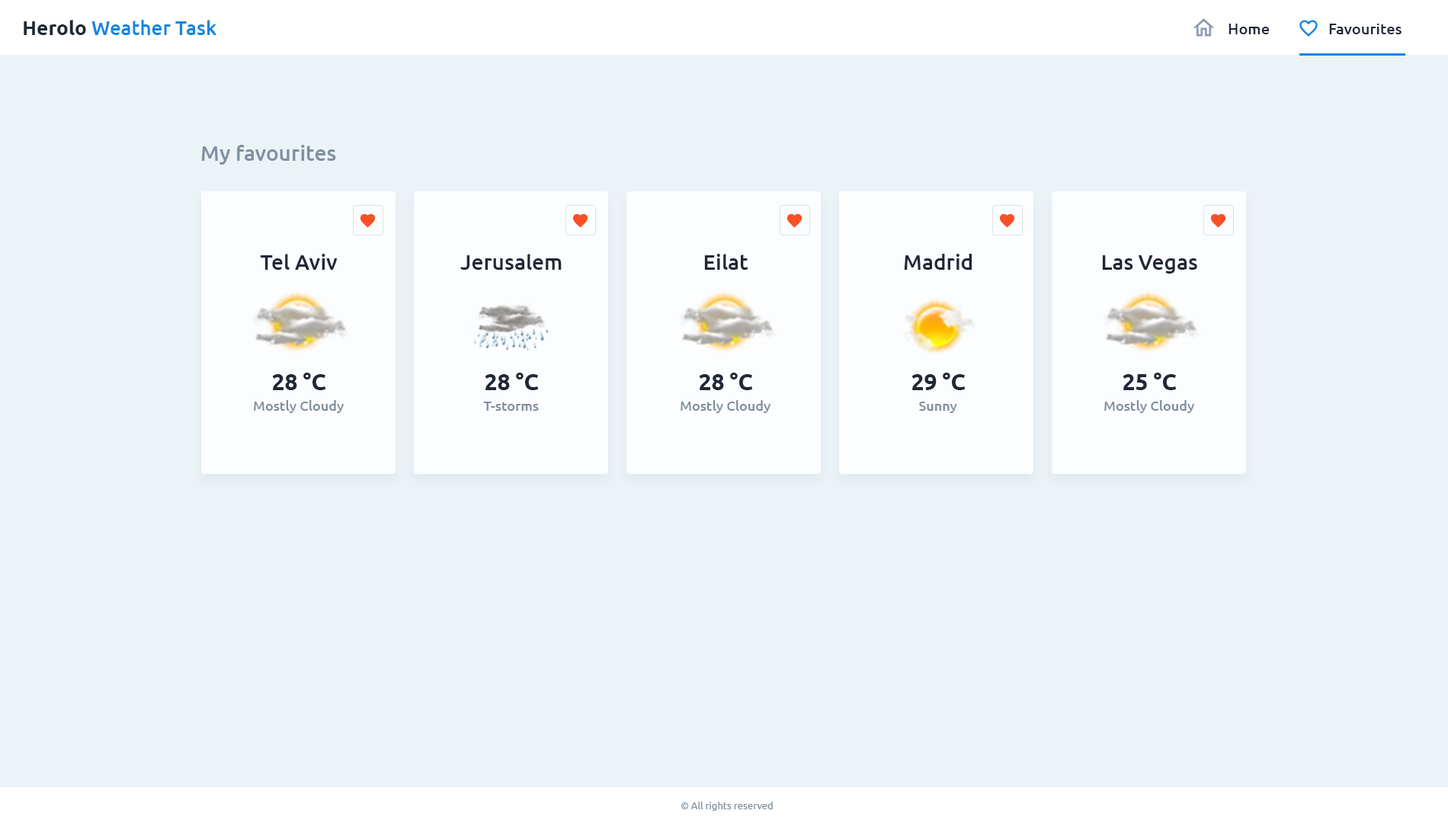
<style>
.page{position:relative;width:1448px;height:823px;background:#ecf3f7}
.page>*{position:absolute;margin:0}
.t1{font:19.8px "Ubuntu-Medium";color:#1685df}
.t2{font:19.8px "Ubuntu-Bold";color:#202837}
.t3{font:15.2px "Ubuntu-Medium";color:#202837}
.t4{font:21.3px "Ubuntu-Medium";color:#808fa1}
.t5{font:21.3px "Ubuntu-Medium";color:#202837}
.t6{font:22.9px "Ubuntu-Bold";color:#202837}
.t7{font:13.7px "Ubuntu-Medium";color:#808fa1}
.t8{font:9.9px "Ubuntu";color:#808fa1}
</style>
<div class="page">
<p class="t1" style="left:24px;top:20px;width:192px;height:15px"><span class="t2">Herolo </span>Weather Task</p>
<p class="t3" style="left:1229px;top:24px;width:41px;height:10px">Home</p>
<p class="t3" style="left:1329px;top:24px;width:73px;height:10px">Favourites</p>
<p class="t4" style="left:201px;top:145px;width:135px;height:20px">My favourites</p>
<p class="t5" style="left:260px;top:254px;width:78px;height:16px">Tel Aviv</p>
<p class="t5" style="left:460px;top:254px;width:102px;height:16px">Jerusalem</p>
<p class="t5" style="left:704px;top:254px;width:45px;height:16px">Eilat</p>
<p class="t5" style="left:904px;top:254px;width:68px;height:16px">Madrid</p>
<p class="t5" style="left:1102px;top:255px;width:96px;height:19px">Las Vegas</p>
<p class="t6" style="left:272px;top:373px;width:54px;height:17px">28 °C</p>
<p class="t6" style="left:485px;top:373px;width:54px;height:17px">28 °C</p>
<p class="t6" style="left:699px;top:373px;width:54px;height:17px">28 °C</p>
<p class="t6" style="left:912px;top:373px;width:54px;height:17px">29 °C</p>
<p class="t6" style="left:1123px;top:373px;width:54px;height:17px">25 °C</p>
<p class="t7" style="left:254px;top:400px;width:90px;height:13px">Mostly Cloudy</p>
<p class="t7" style="left:483px;top:402px;width:56px;height:9px">T-storms</p>
<p class="t7" style="left:681px;top:400px;width:90px;height:13px">Mostly Cloudy</p>
<p class="t7" style="left:919px;top:402px;width:38px;height:11px">Sunny</p>
<p class="t7" style="left:1105px;top:400px;width:90px;height:13px">Mostly Cloudy</p>
<p class="t8" style="left:681px;top:802px;width:92px;height:9px">© All rights reserved</p>
</div>
